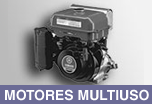
<style>
.page{position:relative;width:152px;height:104px}
.page>*{position:absolute;margin:0}
.t1{font:14px "Helvetica-Bold";color:#ffffff}
</style>
<div class="page">
<p class="t1" style="left:5px;top:89px;width:144px;height:12px">MOTORES MULTIUSO</p>
</div>
